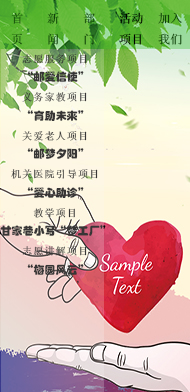
<style>
.page{position:relative;width:190px;height:392px}
.page>*{position:absolute;margin:0}
.t1{font:12px "System"}
.t2{font:12px "System";color:#10410b}
.t3{font:12px "System";color:#000000}
.t4{font:11px "STHupo";color:#373636}
.t5{font:11px "System";color:#373636}
</style>
<div class="page">
<p class="t1" style="left:11px;top:12px;width:12px;height:33px">首<br>页</p>
<p class="t2" style="left:47px;top:12px;width:12px;height:33px">新闻</p>
<p class="t1" style="left:83px;top:12px;width:12px;height:33px">部门</p>
<p class="t3" style="left:119px;top:12px;width:24px;height:33px">活动<br>项目</p>
<p class="t2" style="left:158px;top:12px;width:24px;height:33px">加入<br>我们</p>
<p class="t4" style="left:0px;top:54px;width:106px;height:221px;text-align:center"><span class="t5">志愿服务项目<br></span>“邮爱信使”<br><span class="t5">义务家教项目<br></span>“育助未来”<br><span class="t5">关爱老人项目<br></span>“邮梦夕阳”<br><span class="t5">机关医院引导项目<br></span>“爱心助诊”<br><span class="t5">教学项目<br></span>甘家巷小写“梦工厂”<br><span class="t5">志愿讲解项目<br></span>“梅园风云”</p>
</div>
